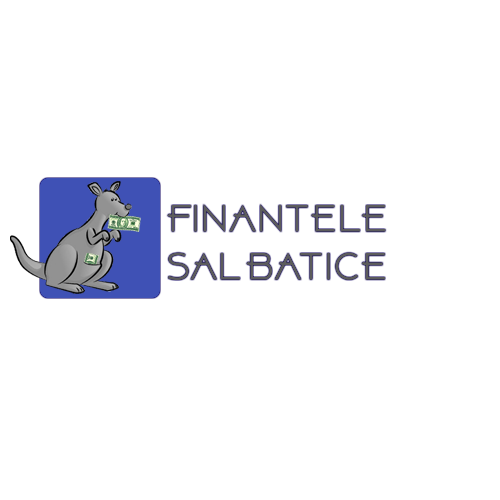
<style>
.page{position:relative;width:500px;height:500px;background:#ffffff}
.page>*{position:absolute;margin:0}
.t1{font:40px "AboveDEMO-Regular";color:#707070}
</style>
<div class="page">
<p class="t1" style="left:167px;top:204px;width:219px;height:76px">FINANTELE <br>SALBATICE</p>
</div>
